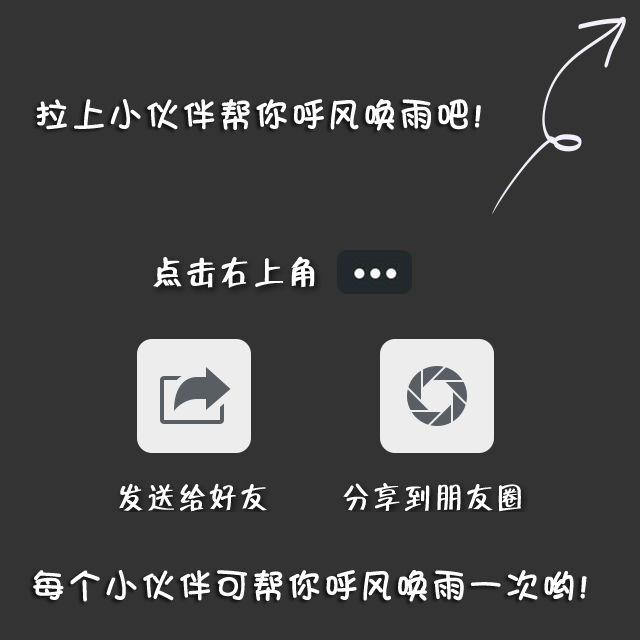
<style>
.page{position:relative;width:640px;height:640px;background:#333333}
.page>*{position:absolute;margin:0}
.t1{font:33px "STHeitiTC-Light";letter-spacing:0.2em;color:#ffffff;font-weight:bold}
</style>
<div class="page">
<p class="t1" style="left:36px;top:99px;width:445px;height:32px">拉上小伙伴帮你呼风唤雨吧!</p>
<p class="t1" style="left:33px;top:570px;width:554px;height:32px">每个小伙伴可帮你呼风唤雨一次哟!</p>
</div>
